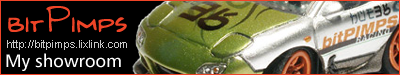
<style>
.page{position:relative;width:400px;height:75px;background:#000000}
.page>*{position:absolute;margin:0}
.t1{font:38px "Kilroy-WasHere";color:#ef4427}
.t2{font:11px "ArialMT";color:#c7c7c7}
.t3{font:18px "Humanist777BT-RomanB";color:#ffffff}
</style>
<div class="page">
<p class="t1" style="left:8px;top:6px;width:119px;height:27px">bitPimps</p>
<p class="t2" style="left:7px;top:40px;width:120px;height:10px">http://bitpimps.lixlink.com</p>
<p class="t3" style="left:6px;top:53px;width:115px;height:18px">My showroom</p>
</div>
